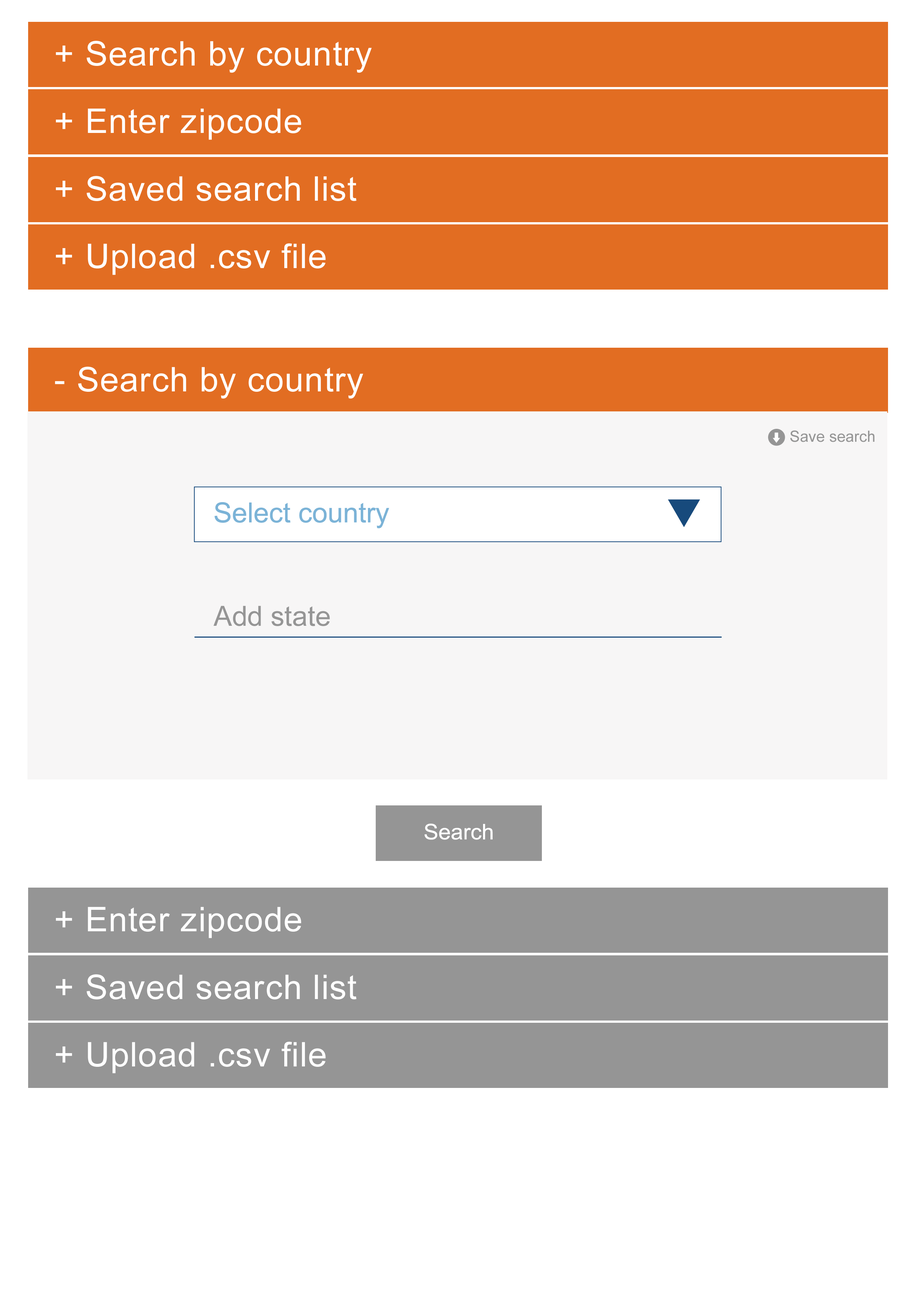
<style>
.page{position:relative;width:918px;height:1299px;background:#ffffff}
.page>*{position:absolute;margin:0}
.t1{font:33.9px "ArialMT";letter-spacing:0.025em;color:#ffffff}
.t2{font:15.4px "ArialMT";color:#959595}
.t3{font:27.8px "ArialMT";color:#7bb3d7}
.t4{font:27.8px "ArialMT";color:#959595}
.t5{font:21.6px "ArialMT";color:#ffffff}
</style>
<div class="page">
<p class="t1" style="left:56px;top:41px;width:316px;height:32px">+ Search by country</p>
<p class="t1" style="left:56px;top:108px;width:245px;height:32px">+ Enter zipcode</p>
<p class="t1" style="left:56px;top:176px;width:301px;height:25px">+ Saved search list</p>
<p class="t1" style="left:56px;top:243px;width:270px;height:32px">+ Upload .csv file</p>
<p class="t1" style="left:55px;top:367px;width:308px;height:32px">- Search by country</p>
<p class="t2" style="left:790px;top:430px;width:85px;height:12px">Save search</p>
<p class="t3" style="left:214px;top:502px;width:175px;height:26px">Select country</p>
<p class="t4" style="left:214px;top:606px;width:116px;height:20px">Add state</p>
<p class="t5" style="left:425px;top:823px;width:68px;height:17px">Search</p>
<p class="t1" style="left:56px;top:907px;width:245px;height:31px">+ Enter zipcode</p>
<p class="t1" style="left:56px;top:974px;width:301px;height:25px">+ Saved search list</p>
<p class="t1" style="left:56px;top:1041px;width:270px;height:32px">+ Upload .csv file</p>
</div>
